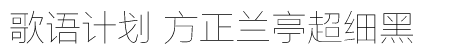
<style>
.page{position:relative;width:450px;height:50px;background:#ffffff}
.page>*{position:absolute;margin:0}
.t1{font:36px "FZLTCXHJW--GB1-0"}
</style>
<div class="page">
<p class="t1" style="left:10px;top:10px;width:403px;height:34px">歌语计划 方正兰亭超细黑</p>
</div>
